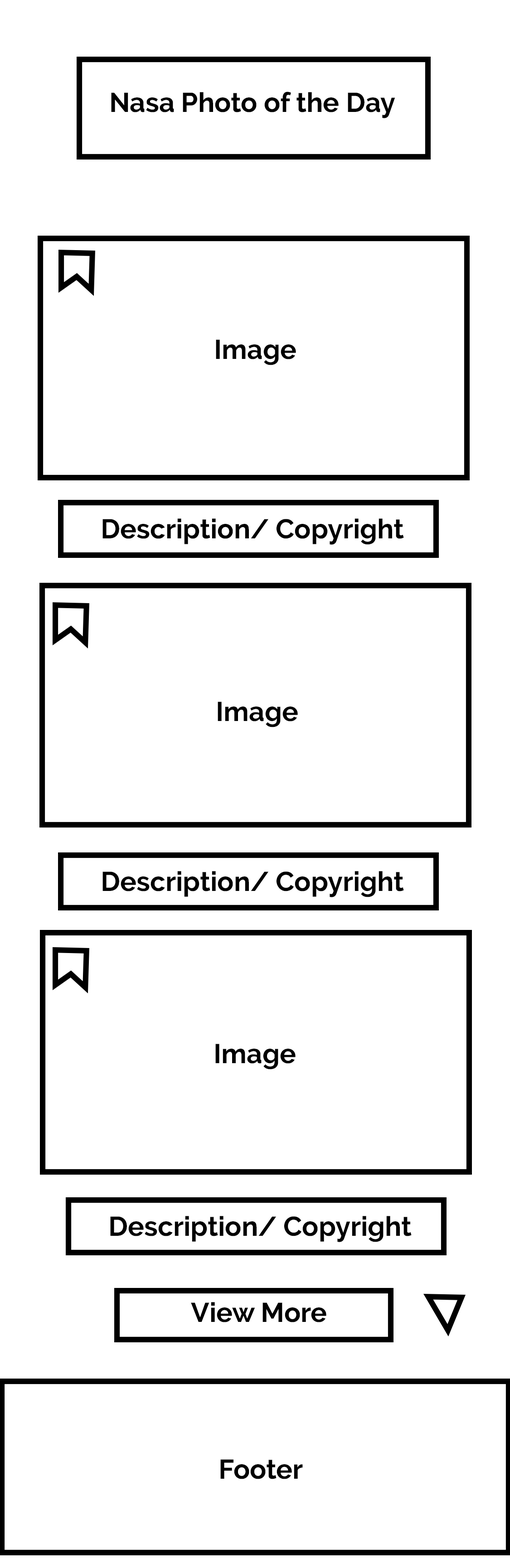
<style>
.page{position:relative;width:510px;height:1568px;background:#ffffff}
.page>*{position:absolute;margin:0}
.t1{font:27.2px "Raleway-Bold";color:#000000}
</style>
<div class="page">
<p class="t1" style="left:111px;top:92px;width:284px;height:26px">Nasa Photo of the Day</p>
<p class="t1" style="left:216px;top:339px;width:80px;height:26px">Image</p>
<p class="t1" style="left:102px;top:518px;width:302px;height:27px">Description/ Copyright</p>
<p class="t1" style="left:218px;top:702px;width:80px;height:25px">Image</p>
<p class="t1" style="left:102px;top:871px;width:302px;height:26px">Description/ Copyright</p>
<p class="t1" style="left:215px;top:1044px;width:80px;height:26px">Image</p>
<p class="t1" style="left:110px;top:1216px;width:301px;height:26px">Description/ Copyright</p>
<p class="t1" style="left:191px;top:1302px;width:135px;height:20px">View More</p>
<p class="t1" style="left:220px;top:1459px;width:83px;height:20px">Footer</p>
</div>
